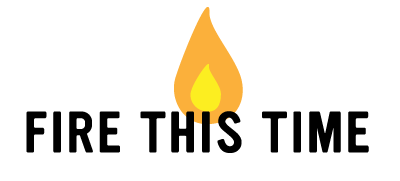
<style>
.page{position:relative;width:400px;height:181px;background:#ffffff}
.page>*{position:absolute;margin:0}
.t1{font:50px "Ultramagnetic";letter-spacing:0.025em;color:#000000;font-weight:bold}
</style>
<div class="page">
<p class="t1" style="left:26px;top:111px;width:343px;height:42px">FIRE THIS TIME</p>
</div>
